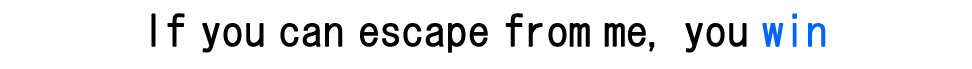
<style>
.page{position:relative;width:972px;height:69px;background:#ffffff}
.page>*{position:absolute;margin:0}
.t1{font:41.7px "HGGothicM";color:#000000;font-weight:bold}
.t2{font:41.7px "HGGothicM";color:#0066ff;font-weight:bold}
</style>
<div class="page">
<p class="t1" style="left:151px;top:13px;width:675px;height:40px">If you can escape from me, you <span class="t2">win</span></p>
</div>
